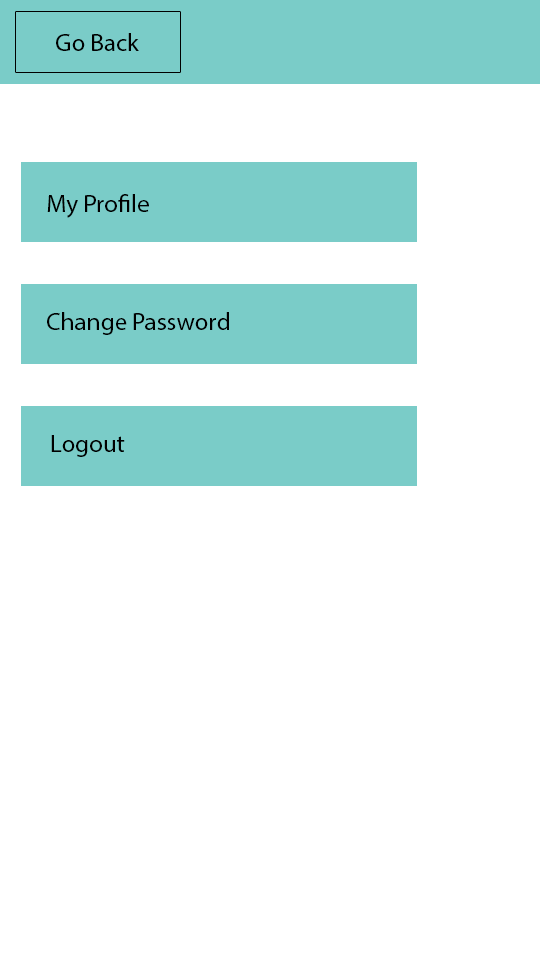
<style>
.page{position:relative;width:540px;height:960px;background:#ffffff}
.page>*{position:absolute;margin:0}
.t1{font:25px "MyriadPro-Regular";color:#000000}
</style>
<div class="page">
<p class="t1" style="left:56px;top:33px;width:83px;height:18px">Go Back</p>
<p class="t1" style="left:47px;top:194px;width:102px;height:24px">My Profile</p>
<p class="t1" style="left:47px;top:312px;width:182px;height:23px">Change Password</p>
<p class="t1" style="left:51px;top:435px;width:74px;height:22px">Logout</p>
</div>
